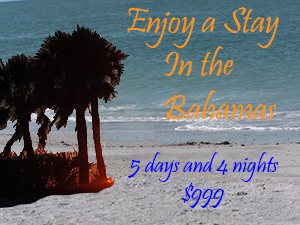
<style>
.page{position:relative;width:300px;height:225px}
.page>*{position:absolute;margin:0}
.t1{font:36px "Pristina-Regular";color:#f7941d}
.t2{font:24px "Pristina-Regular";color:#0000ff}
</style>
<div class="page">
<p class="t1" style="left:127px;top:7px;width:152px;height:41px">Enjoy a Stay</p>
<p class="t1" style="left:164px;top:46px;width:113px;height:74px">In the <br>Bahamas</p>
<p class="t2" style="left:127px;top:152px;width:152px;height:56px">5 days and 4 nights<br>            $999</p>
</div>
